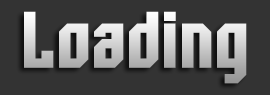
<style>
.page{position:relative;width:270px;height:95px;background:#333333}
.page>*{position:absolute;margin:0}
.t1{font:79.8px "Whitestone-Bold"}
</style>
<div class="page">
<p class="t1" style="left:24px;top:11px;width:223px;height:73px">Loading</p>
</div>
